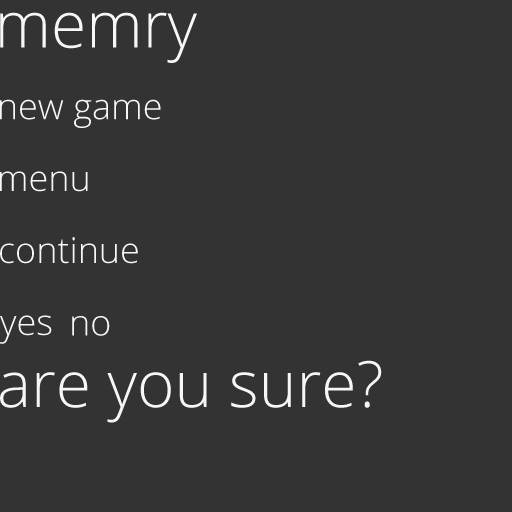
<style>
.page{position:relative;width:512px;height:512px;background:#333333}
.page>*{position:absolute;margin:0}
.t1{font:64px "OpenSans-Light";color:#f7f7f7}
.t2{font:36px "OpenSans-Light";color:#f7f7f7}
</style>
<div class="page">
<p class="t1" style="left:0px;top:12px;width:197px;height:51px">memry</p>
<p class="t2" style="left:0px;top:99px;width:161px;height:29px">new game</p>
<p class="t2" style="left:0px;top:171px;width:88px;height:21px">menu</p>
<p class="t2" style="left:0px;top:237px;width:138px;height:27px">continue</p>
<p class="t2" style="left:0px;top:315px;width:52px;height:29px">yes</p>
<p class="t2" style="left:72px;top:316px;width:38px;height:20px">no</p>
<p class="t1" style="left:0px;top:360px;width:382px;height:63px">are you sure?</p>
</div>
